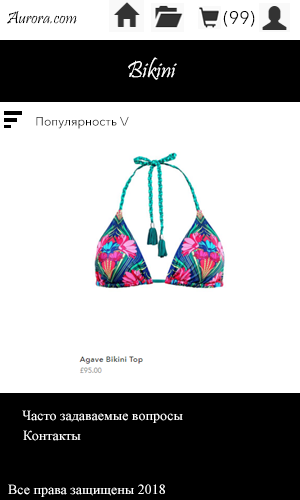
<style>
.page{position:relative;width:300px;height:500px;background:#ffffff}
.page>*{position:absolute;margin:0}
.t1{font:18px "Pristina-Regular";color:#000000}
.t2{font:18px "AvenirNextCyr-Regular";color:#000000}
.t3{font:24px "Pristina-Regular";color:#ffffff}
.t4{font:12px "AvenirNextCyr-Regular";color:#000000}
.t5{font:14px "TimesNewRomanPSMT";color:#ffffff}
</style>
<div class="page">
<p class="t1" style="left:7px;top:11px;width:70px;height:13px">Aurora.com</p>
<p class="t2" style="left:223px;top:10px;width:32px;height:17px">(99)</p>
<p class="t3" style="left:128px;top:57px;width:49px;height:23px">Bikini</p>
<p class="t4" style="left:36px;top:116px;width:93px;height:13px">Популярность \/</p>
<p class="t5" style="left:22px;top:410px;width:161px;height:13px">Часто задаваемые вопросы</p>
<p class="t5" style="left:23px;top:430px;width:58px;height:11px">Контакты</p>
<p class="t5" style="left:8px;top:484px;width:157px;height:13px">Все права защищены 2018</p>
</div>
